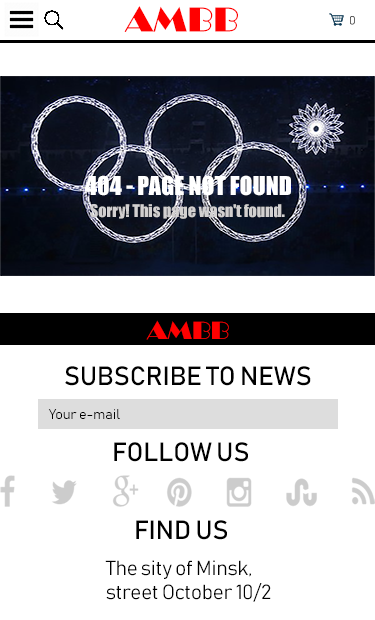
<style>
.page{position:relative;width:375px;height:620px;background:#ffffff}
.page>*{position:absolute;margin:0}
.t1{font:36px "Broadway";color:#ff0000}
.t2{font:12px "Bahnschrift"}
.t3{font:24px "Impact";color:#ffffff}
.t4{font:16px "Impact";color:#d2d0d0}
.t5{font:26px "Broadway";color:#ff0000}
.t6{font:26px "Bahnschrift";color:#000000}
.t7{font:14px "Bahnschrift";color:#000000}
.t8{font:20px "Bahnschrift";color:#000000}
</style>
<div class="page">
<p class="t1" style="left:124px;top:6px;width:114px;height:26px">AMBB</p>
<p class="t2" style="left:350px;top:16px;width:5px;height:9px">0</p>
<p class="t3" style="left:85px;top:175px;width:206px;height:21px">404 - PAGE NOT FOUND</p>
<p class="t4" style="left:90px;top:204px;width:195px;height:15px">Sorry! This page wasn't found.</p>
<p class="t5" style="left:146px;top:320px;width:83px;height:20px">AMBB</p>
<p class="t6" style="left:65px;top:366px;width:246px;height:20px">SUBSCRIBE TO NEWS</p>
<p class="t7" style="left:48px;top:409px;width:72px;height:10px">Your e-mail</p>
<p class="t6" style="left:114px;top:442px;width:134px;height:20px">FOLLOW US</p>
<p class="t6" style="left:136px;top:520px;width:91px;height:20px">FIND US</p>
<p class="t8" style="left:105px;top:560px;width:166px;height:42px">The sity of Minsk,<br>street October 10/2</p>
</div>
